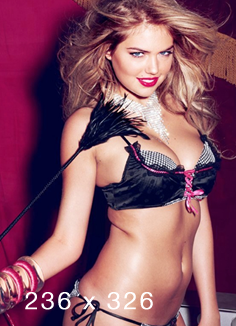
<style>
.page{position:relative;width:236px;height:326px}
.page>*{position:absolute;margin:0}
.t1{font:24px "HelveticaNeue-Light";letter-spacing:0.1em;color:#ffffff;font-weight:bold}
</style>
<div class="page">
<p class="t1" style="left:25px;top:292px;width:128px;height:18px">236 x 326</p>
</div>
